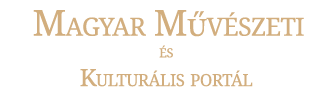
<style>
.page{position:relative;width:334px;height:95px;background:#ffffff}
.page>*{position:absolute;margin:0}
.t1{font:24px "DroidSerif";letter-spacing:-0.025em;color:#d2ae7e;font-variant:small-caps}
.t2{font:36px "DroidSerif";letter-spacing:-0.025em;color:#d2ae7e;font-variant:small-caps}
.t3{font:36px "MinionPro-Regular";letter-spacing:-0.025em;color:#d2ae7e;font-variant:small-caps}
.t4{font:18px "DroidSerif";letter-spacing:-0.025em;color:#d2ae7e;font-variant:small-caps}
</style>
<div class="page">
<p class="t1" style="left:33px;top:10px;width:271px;height:77px;text-align:center"><span class="t2">Magyar M</span><span class="t3">ű</span><span class="t2">vészeti<br></span><span class="t4">és <br></span>Kulturális portál</p>
</div>
